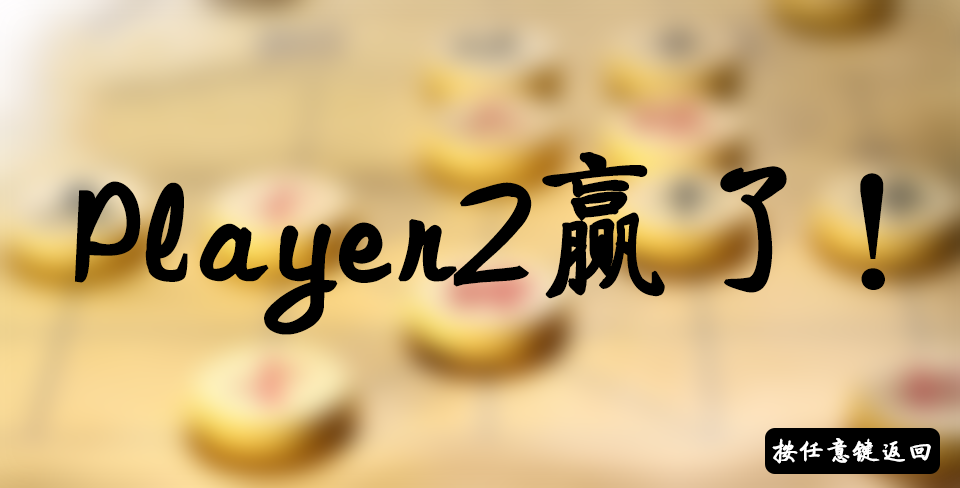
<style>
.page{position:relative;width:960px;height:488px}
.page>*{position:absolute;margin:0}
.t1{font:150px "FZQTJW--GB1-0";color:#000000;font-weight:bold}
.t2{font:26.5px "FZQTJW--GB1-0";color:#ffffff;font-weight:bold}
</style>
<div class="page">
<p class="t1" style="left:74px;top:152px;width:811px;height:183px">Player2赢了！</p>
<p class="t2" style="left:772px;top:438px;width:159px;height:26px">按任意键返回</p>
</div>
